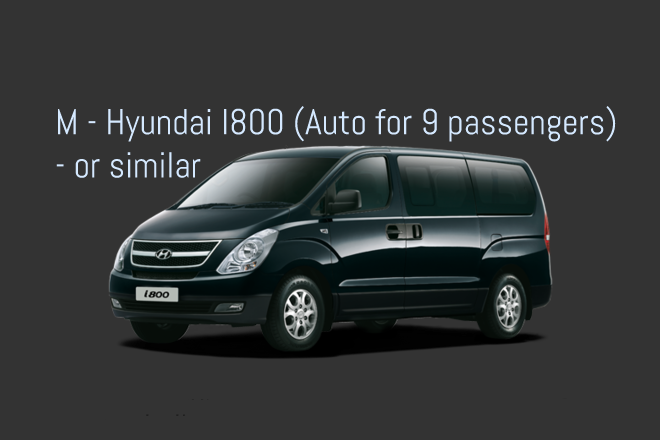
<style>
.page{position:relative;width:660px;height:440px;background:#333333}
.page>*{position:absolute;margin:0}
.t1{font:36px "Abel-Regular";color:#d5e9ff}
</style>
<div class="page">
<p class="t1" style="left:56px;top:105px;width:560px;height:73px">M - Hyundai I800 (Auto for 9 passengers) - or similar</p>
</div>
